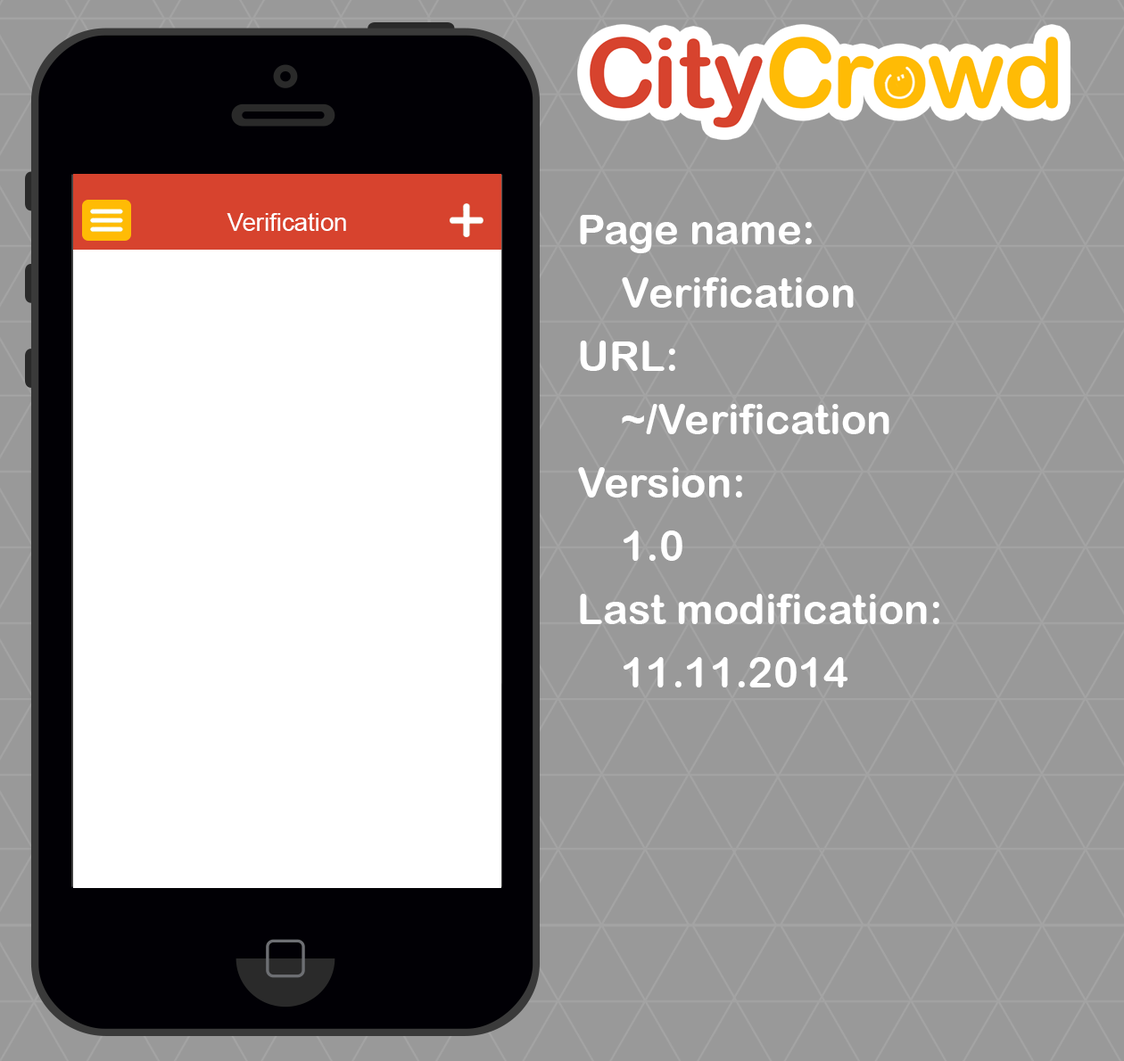
<style>
.page{position:relative;width:1124px;height:1061px;background:#999999}
.page>*{position:absolute;margin:0}
.t1{font:24.6px "ArialMT";color:#ffffff}
.t2{font:42.2px/63.3px "ArialRoundedMTBold";color:#ffffff}
</style>
<div class="page">
<p class="t1" style="left:227px;top:213px;width:119px;height:18px">Verification</p>
<p class="t2" style="left:578px;top:215px;width:361px;height:473px">Page name:<br>Verification<br>URL:<br>~/Verification<br>Version:<br>1.0<br>Last modification:<br>11.11.2014</p>
</div>
